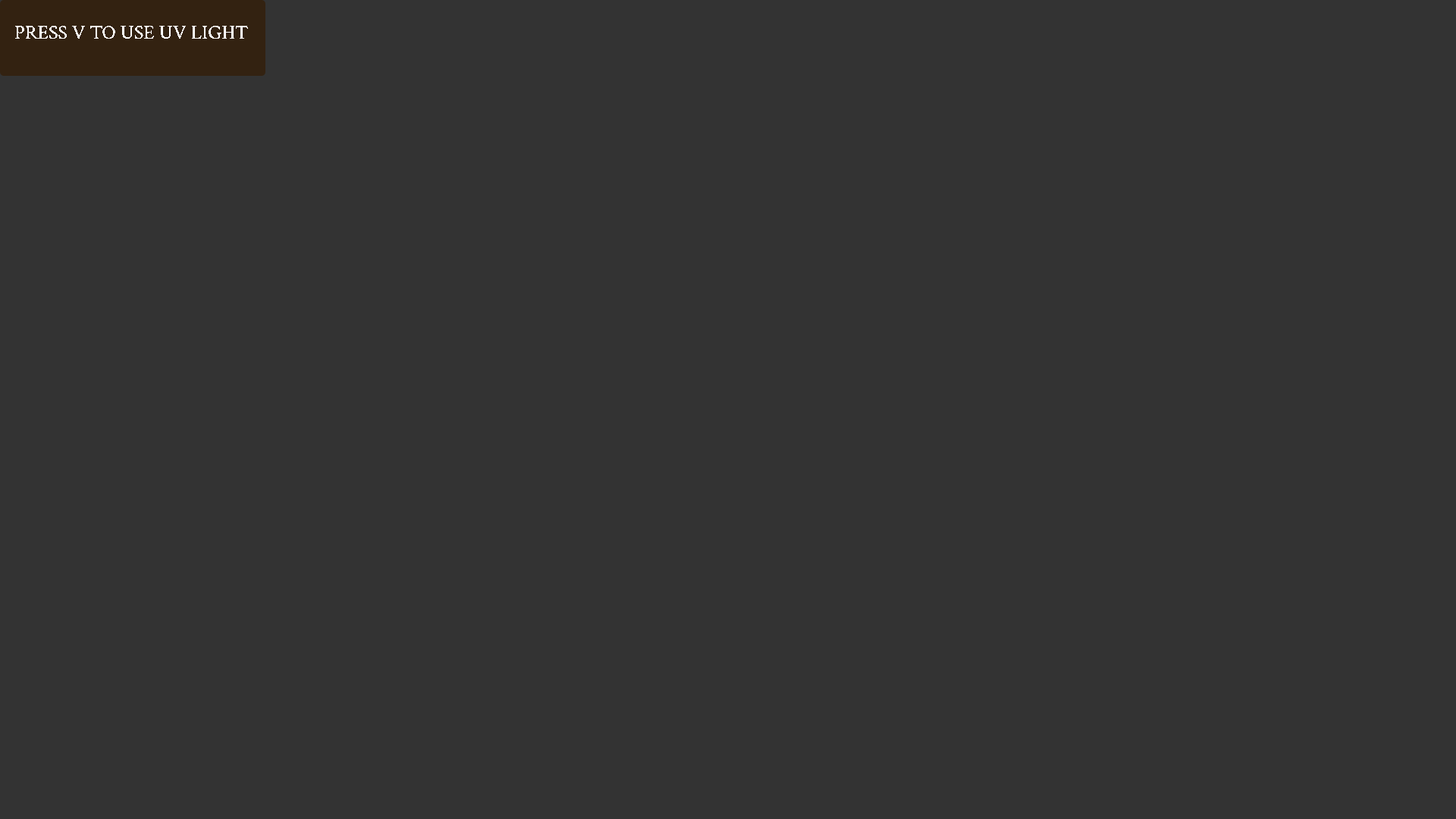
<style>
.page{position:relative;width:1456px;height:819px;background:#333333}
.page>*{position:absolute;margin:0}
.t1{font:19.7px "CrimsonText-Regular";color:#ffffff}
</style>
<div class="page">
<p class="t1" style="left:15px;top:26px;width:233px;height:13px">PRESS V TO USE UV LIGHT</p>
</div>
